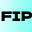
<style>
.page{position:relative;width:32px;height:32px}
.page>*{position:absolute;margin:0}
.t1{font:13.1px "DelaGothicOne-Regular";color:#000000}
</style>
<div class="page">
<p class="t1" style="left:1px;top:11px;width:32px;height:10px">FIP</p>
</div>
